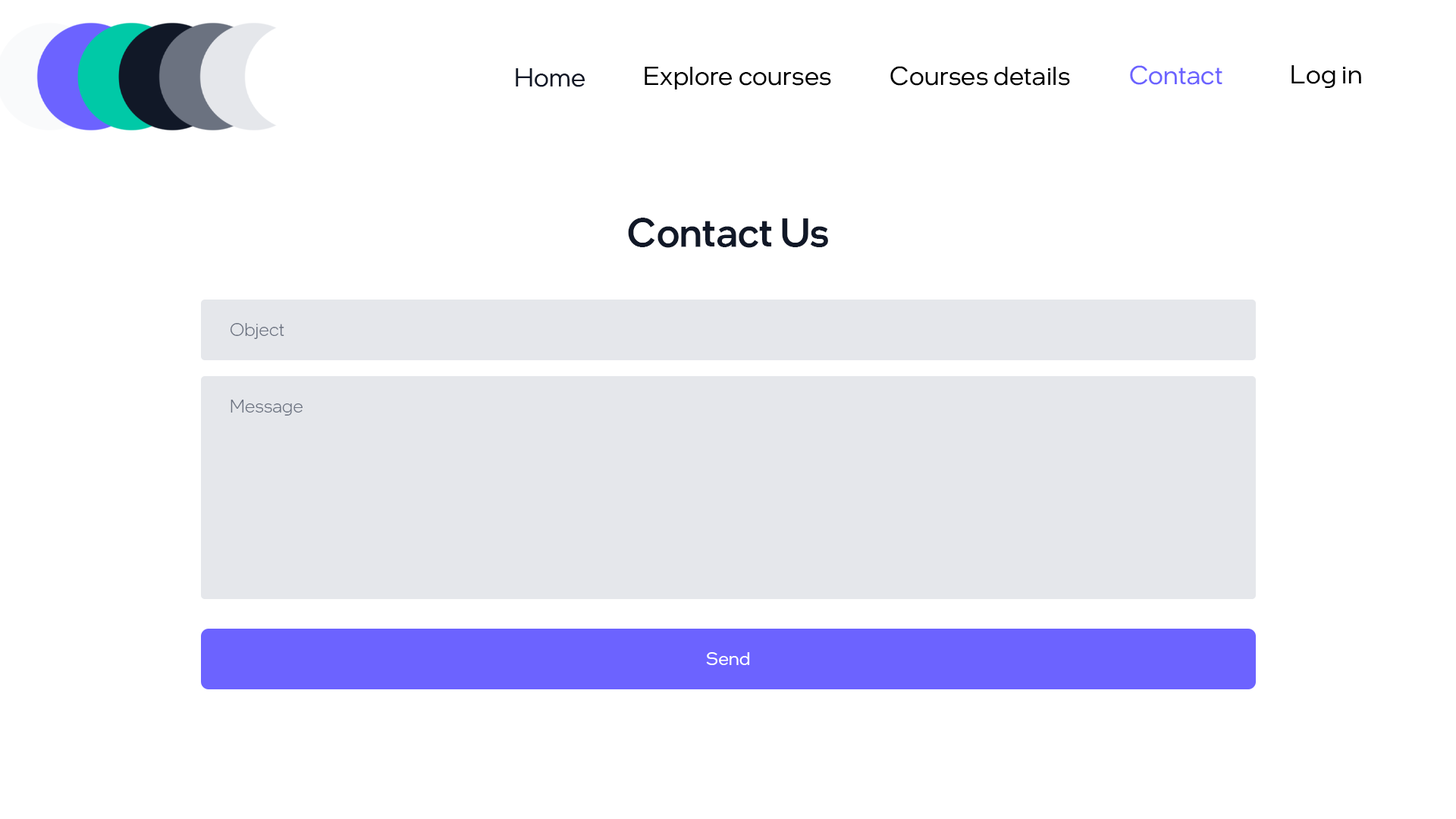
<style>
.page{position:relative;width:1456px;height:819px;background:#ffffff}
.page>*{position:absolute;margin:0}
.t1{font:26.5px "IntelOneDisplay-Regular";letter-spacing:0.01em;color:#000000}
.t2{font:26.5px "IntelOneDisplay-Regular";letter-spacing:0.01em;color:#6c63ff}
.t3{font:26.5px "IntelOneDisplay-Regular";letter-spacing:0.01em;color:#111827}
.t4{font:39.5px "IntelOneDisplay-Medium";letter-spacing:0.01em;color:#111827}
.t5{font:18.6px "IntelOneDisplay-Light";letter-spacing:0.01em;color:#6b7280}
.t6{font:18.6px "IntelOneDisplay-Regular";letter-spacing:0.01em;color:#ffffff}
</style>
<div class="page">
<p class="t1" style="left:890px;top:66px;width:180px;height:20px">Courses details</p>
<p class="t2" style="left:1130px;top:65px;width:92px;height:20px">Contact</p>
<p class="t1" style="left:1291px;top:65px;width:70px;height:23px">Log in</p>
<p class="t3" style="left:516px;top:68px;width:69px;height:19px">Home</p>
<p class="t1" style="left:645px;top:67px;width:186px;height:22px">Explore courses</p>
<p class="t4" style="left:628px;top:218px;width:200px;height:30px">Contact Us</p>
<p class="t5" style="left:230px;top:323px;width:54px;height:16px">Object</p>
<p class="t5" style="left:231px;top:400px;width:72px;height:16px">Message</p>
<p class="t6" style="left:706px;top:652px;width:44px;height:13px">Send</p>
</div>
